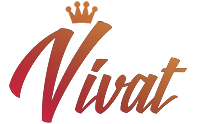
<style>
.page{position:relative;width:200px;height:124px;background:#ffffff}
.page>*{position:absolute;margin:0}
.t1{font:79px "LogotypeFrenzy"}
.t2{font:115.6px "LogotypeFrenzy"}
.t3{font:79px "LogotypeFrenzy";letter-spacing:0.018em}
</style>
<div class="page">
<p class="t1" style="left:9px;top:21px;width:178px;height:102px"><span class="t2">V</span><span class="t3">i</span>vat</p>
</div>
